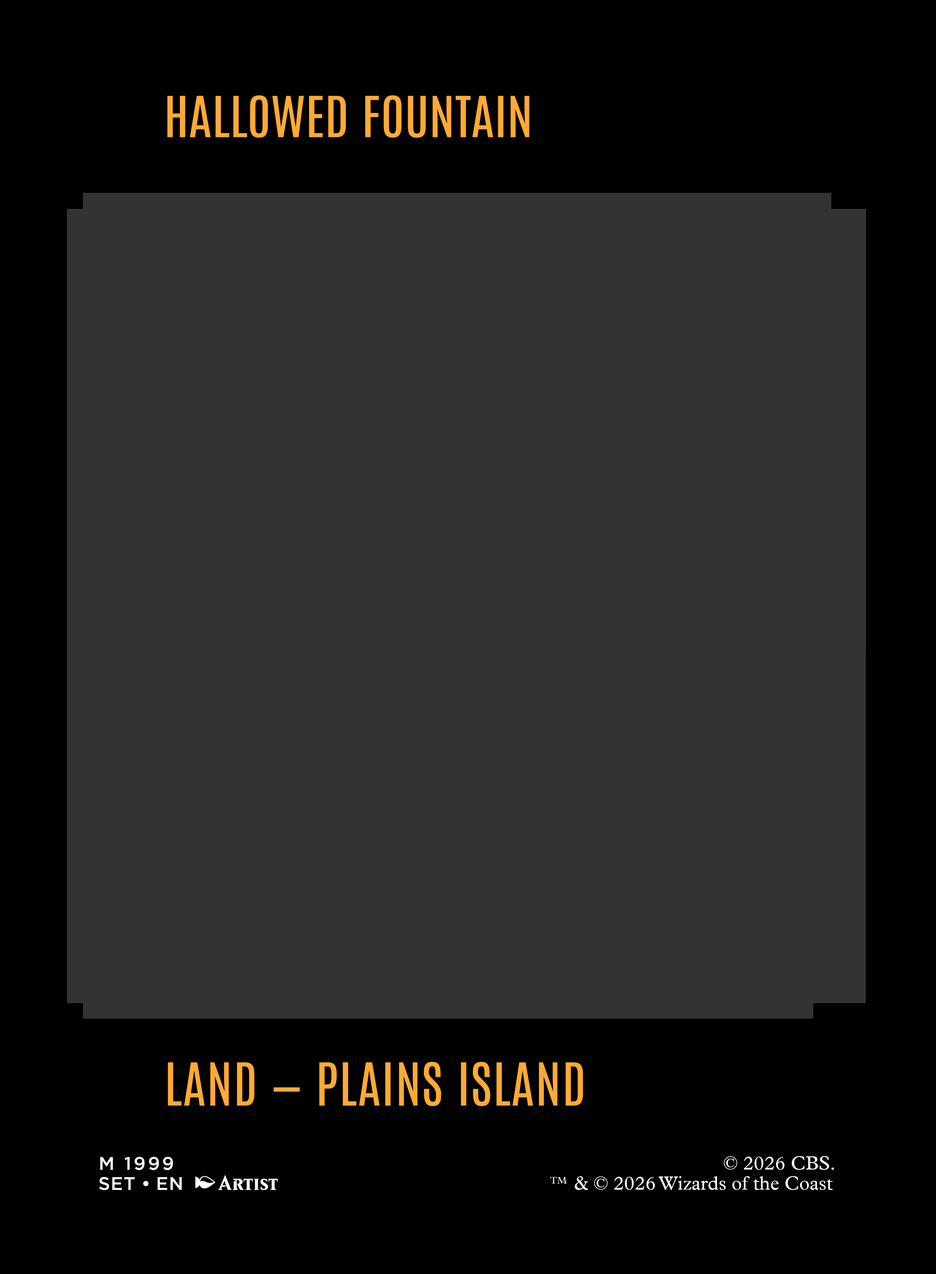
<style>
.page{position:relative;width:936px;height:1274px;background:#333333}
.page>*{position:absolute;margin:0}
.t1{font:48px "Antonio-Regular";color:#ffaa33;text-transform:uppercase;scale:1.09 1}
.t2{font:50.2px "Antonio-Regular";letter-spacing:0.02em;color:#ffaa33;text-transform:uppercase;scale:1.03 1}
.t3{font:18.2px "Gotham-Medium";letter-spacing:0.125em;color:#ffffff}
.t4{font:19.1px "PlantinOUP";color:#ffffff}
.t5{font:20.4px "BelerenSmallCaps-Bold";color:#ffffff}
.t6{font:18.2px "Gotham-Medium";letter-spacing:0.04em;color:#ffffff}
.t7{font:18.2px "Gotham-Medium";color:#ffffff}
.t8{font:22.2px "Proxyglyph";letter-spacing:0.2em;color:#ffffff}
.t9{font:9.6px "PlantinOUP";color:#ffffff}
</style>
<div class="page">
<p class="t1" style="left:167px;top:95px;width:363px;height:43px">HALLOWED FOUNTAIN</p>
<p class="t2" style="left:168px;top:1061px;width:415px;height:45px">LAND — PLAINS ISLAND</p>
<p class="t3" style="left:100px;top:1156px;width:73px;height:14px">M 1999</p>
<p class="t4" style="left:724px;top:1156px;width:110px;height:13px">© 2026 CBS.</p>
<p class="t5" style="left:99px;top:1175px;width:179px;height:15px"><span class="t6">SET</span><span class="t7"> • </span><span class="t6">EN </span><span class="t8">a</span>Artist</p>
<p class="t9" style="left:550px;top:1177px;width:17px;height:6px">TM</p>
<p class="t4" style="left:575px;top:1176px;width:258px;height:14px">&amp; © 2026 Wizards of the Coast</p>
</div>
